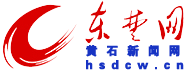
<style>
.page{position:relative;width:190px;height:71px;background:#ffffff}
.page>*{position:absolute;margin:0}
.t1{font:12px/14px "FZDHTK--GBK1-0";letter-spacing:0.5em;color:#1733c3;font-weight:bold}
.t2{font:12px/14px "FZDHTK--GBK1-0";letter-spacing:0.7em;color:#1733c3;font-weight:bold}
</style>
<div class="page">
<p class="t1" style="left:86px;top:45px;width:98px;height:25px"><span class="t2">黄石新闻网<br></span>hsdcw.cn</p>
</div>
